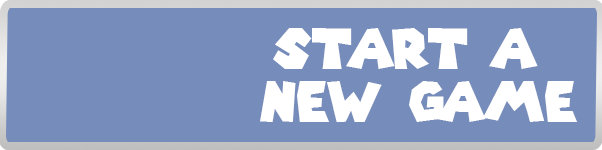
<style>
.page{position:relative;width:602px;height:150px;background:#768cbb}
.page>*{position:absolute;margin:0}
.t1{font:54.8px/53.1px "SuperMarioGalaxy";color:#ffffff}
</style>
<div class="page">
<p class="t1" style="left:260px;top:28px;width:318px;height:94px;text-align:center">start a <br>new game</p>
</div>
